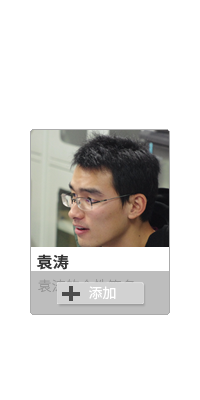
<style>
.page{position:relative;width:200px;height:400px;background:#ffffff}
.page>*{position:absolute;margin:0}
.t1{font:15.7px "NotoSansCJKsc-Bold";color:#353535}
.t2{font:13.7px "NotoSansCJKsc-Regular";color:#ffffff}
</style>
<div class="page">
<p class="t1" style="left:36px;top:254px;width:33px;height:16px">袁涛</p>
<p class="t2" style="left:89px;top:286px;width:27px;height:14px">添加</p>
</div>
